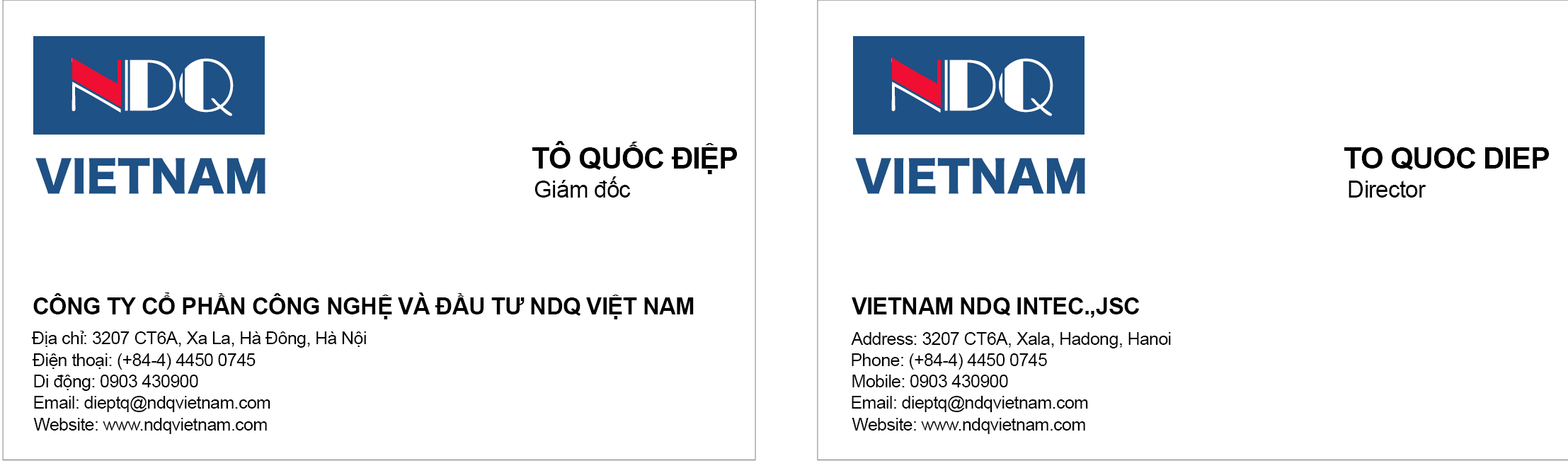
<style>
.page{position:relative;width:1568px;height:461px;background:#ffffff}
.page>*{position:absolute;margin:0}
.t1{font:29.5px "Arial-BoldMT";letter-spacing:-0.025em;color:#000000}
.t2{font:23.6px "ArialMT";letter-spacing:-0.025em;color:#000000}
.t3{font:23.6px "Arial-BoldMT";letter-spacing:-0.025em;color:#000000}
.t4{font:17.7px "ArialMT";letter-spacing:-0.025em;color:#000000}
</style>
<div class="page">
<p class="t1" style="left:532px;top:141px;width:205px;height:33px">TÔ QUỐC ĐIỆP</p>
<p class="t1" style="left:1344px;top:147px;width:205px;height:23px">TO QUOC DIEP</p>
<p class="t2" style="left:534px;top:176px;width:97px;height:22px">Giám đốc</p>
<p class="t2" style="left:1349px;top:181px;width:77px;height:17px">Director</p>
<p class="t3" style="left:33px;top:292px;width:661px;height:27px">CÔNG TY CỔ PHẦN CÔNG NGHỆ VÀ ĐẦU TƯ NDQ VIỆT NAM</p>
<p class="t3" style="left:852px;top:297px;width:288px;height:21px">VIETNAM NDQ INTEC.,JSC</p>
<p class="t4" style="left:32px;top:331px;width:334px;height:17px">Địa chỉ: 3207 CT6A, Xa La, Hà Đông, Hà Nội</p>
<p class="t4" style="left:851px;top:332px;width:320px;height:16px">Address: 3207 CT6A, Xala, Hadong, Hanoi</p>
<p class="t4" style="left:33px;top:353px;width:223px;height:17px">Điện thoại: (+84-4) 4450 0745</p>
<p class="t4" style="left:852px;top:353px;width:195px;height:17px">Phone: (+84-4) 4450 0745</p>
<p class="t4" style="left:34px;top:374px;width:164px;height:17px">Di động: 0903 430900</p>
<p class="t4" style="left:852px;top:374px;width:156px;height:13px">Mobile: 0903 430900</p>
<p class="t4" style="left:34px;top:396px;width:236px;height:16px">Email: dieptq@ndqvietnam.com</p>
<p class="t4" style="left:852px;top:396px;width:236px;height:16px">Email: dieptq@ndqvietnam.com</p>
<p class="t4" style="left:33px;top:418px;width:234px;height:16px">Website: www.ndqvietnam.com</p>
<p class="t4" style="left:852px;top:418px;width:233px;height:16px">Website: www.ndqvietnam.com</p>
</div>
